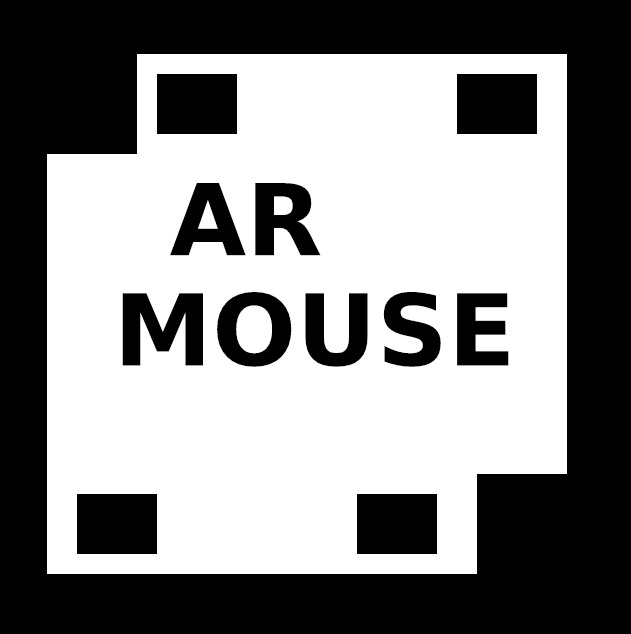
<style>
.page{position:relative;width:631px;height:634px;background:#ffffff}
.page>*{position:absolute;margin:0}
.t1{font:99px "DejaVuSans-Bold";color:#000000}
</style>
<div class="page">
<p class="t1" style="left:170px;top:183px;width:151px;height:73px">AR</p>
<p class="t1" style="left:122px;top:292px;width:387px;height:75px">MOUSE</p>
</div>
